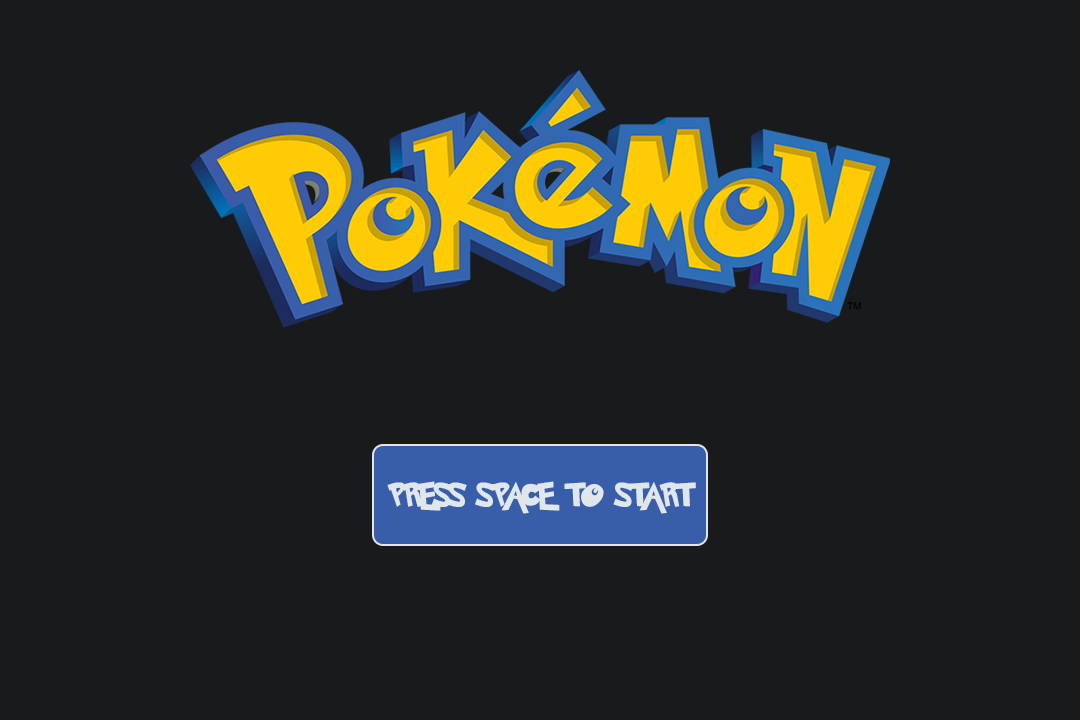
<style>
.page{position:relative;width:1080px;height:720px;background:#181a1b}
.page>*{position:absolute;margin:0}
.t1{font:27.1px "PokemonSolidNormal";color:#dfe6ec}
</style>
<div class="page">
<p class="t1" style="left:387px;top:481px;width:309px;height:33px">PRESS SPACE TO START</p>
</div>
